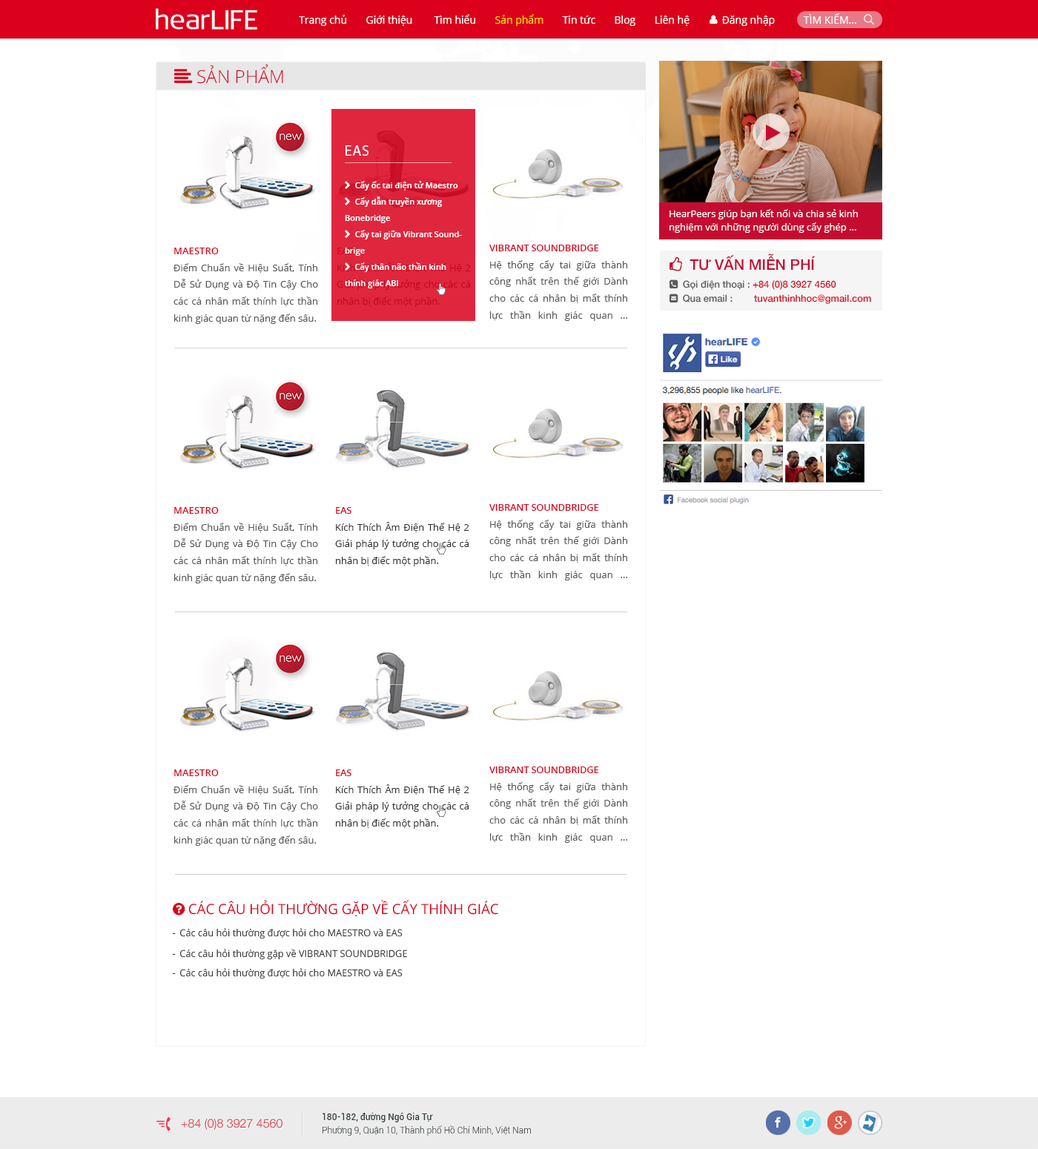
<style>
.page{position:relative;width:1038px;height:1149px;background:#ffffff}
.page>*{position:absolute;margin:0}
.t1{font:10.4px "OpenSans";color:#ffffff}
.t2{font:10.4px "OpenSans";color:#ffd800}
.t3{font:9.6px/13.3px "OpenSans";color:#ffffff}
.t4{font:9.6px/16.8px "OpenSans";color:#58595b}
.t5{font:9.6px/13.8px "OpenSans-Semibold";letter-spacing:-0.02em;color:#db001b;text-transform:uppercase}
.t6{font:9.6px/13.8px "OpenSans-Semibold";color:#db001b;text-transform:uppercase}
.t7{font:9.6px/16.8px "OpenSans";color:#c2081f}
.t8{font:9.6px/13.8px "OpenSans-Semibold";letter-spacing:-0.02em;color:#c2081f;text-transform:uppercase}
.t9{font:9.6px/16.8px "OpenSans";color:#363636}
.t10{font:9.6px "OpenSans";color:#363636}
.t11{font:9.6px "MyriadPro-Regular";color:#363636}
.t12{font:11.9px "HelveticaNeue-Light";color:#dd2f3f}
.t13{font:8.9px/13.3px "Roboto-Light";color:#373f41}
.t14{font:8.9px/13.3px "Roboto-Medium";color:#373f41}
</style>
<div class="page">
<p class="t1" style="left:299px;top:13px;width:557px;height:13px">Trang chủ       Giới thiệu        Tìm hiểu       <span class="t2">Sản phẩm</span>       Tin tức       Blog       Liên hệ            Đăng nhập           TÌM KIẾM...</p>
<p class="t3" style="left:669px;top:209px;width:189px;height:24px">HearPeers giúp bạn kết nối và chia sẻ kinh nghiệm với những người dùng cấy ghép ...</p>
<p class="t4" style="left:489px;top:245px;width:139px;height:76px;text-align:justify"><span class="t5">VIBRANT SOUNDBRIDGE<br></span>Hệ thống cấy tai giữa thành công nhất trên thế giới Dành cho các cá nhân bị mất thính lực thần kinh giác quan ... truyền và hỗn hợp.</p>
<p class="t4" style="left:173px;top:248px;width:145px;height:76px;text-align:justify"><span class="t6">MAESTRO<br></span>Điểm Chuẩn về Hiệu Suất, Tính Dễ Sử Dụng và Độ Tin Cậy Cho các cá nhân mất thính lực thần kinh giác quan từ nặng đến sâu.</p>
<p class="t7" style="left:337px;top:248px;width:134px;height:59px;text-align:justify"><span class="t8">EAS<br></span>Kích Thích Âm Điện Thế Hệ 2 Giải pháp lý tưởng cho các cá nhân bị điếc một phần.</p>
<p class="t4" style="left:173px;top:507px;width:145px;height:76px;text-align:justify"><span class="t6">MAESTRO<br></span>Điểm Chuẩn về Hiệu Suất, Tính Dễ Sử Dụng và Độ Tin Cậy Cho các cá nhân mất thính lực thần kinh giác quan từ nặng đến sâu.</p>
<p class="t9" style="left:335px;top:507px;width:134px;height:59px;text-align:justify"><span class="t5">EAS<br></span>Kích Thích Âm Điện Thế Hệ 2 Giải pháp lý tưởng cho các cá nhân bị điếc một phần.</p>
<p class="t4" style="left:489px;top:504px;width:139px;height:76px;text-align:justify"><span class="t5">VIBRANT SOUNDBRIDGE<br></span>Hệ thống cấy tai giữa thành công nhất trên thế giới Dành cho các cá nhân bị mất thính lực thần kinh giác quan ... truyền và hỗn hợp.</p>
<p class="t4" style="left:173px;top:769px;width:145px;height:77px;text-align:justify"><span class="t6">MAESTRO<br></span>Điểm Chuẩn về Hiệu Suất, Tính Dễ Sử Dụng và Độ Tin Cậy Cho các cá nhân mất thính lực thần kinh giác quan từ nặng đến sâu.</p>
<p class="t9" style="left:335px;top:769px;width:134px;height:60px;text-align:justify"><span class="t5">EAS<br></span>Kích Thích Âm Điện Thế Hệ 2 Giải pháp lý tưởng cho các cá nhân bị điếc một phần.</p>
<p class="t4" style="left:489px;top:766px;width:139px;height:77px;text-align:justify"><span class="t5">VIBRANT SOUNDBRIDGE<br></span>Hệ thống cấy tai giữa thành công nhất trên thế giới Dành cho các cá nhân bị mất thính lực thần kinh giác quan ... truyền và hỗn hợp.</p>
<p class="t10" style="left:173px;top:928px;width:230px;height:11px"><span class="t11">-  </span>Các câu hỏi thường được hỏi cho MAESTRO và EAS</p>
<p class="t10" style="left:173px;top:949px;width:234px;height:11px"><span class="t11">-  </span>Các câu hỏi thường gặp về VIBRANT SOUNDBRIDGE</p>
<p class="t10" style="left:173px;top:968px;width:230px;height:11px"><span class="t11">-  </span>Các câu hỏi thường được hỏi cho MAESTRO và EAS</p>
<p class="t12" style="left:181px;top:1119px;width:101px;height:11px">+84 (0)8 3927 4560</p>
<p class="t13" style="left:322px;top:1113px;width:210px;height:23px"><span class="t14">180-182, đường Ngô Gia Tự<br></span>Phường 9, Quận 10, Thành phố Hồ Chí Minh, Việt Nam</p>
</div>
